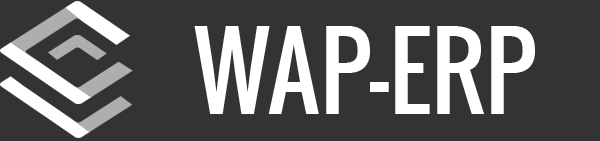
<style>
.page{position:relative;width:600px;height:141px;background:#333333}
.page>*{position:absolute;margin:0}
.t1{font:100px "Oswald-Regular";color:#ffffff}
</style>
<div class="page">
<p class="t1" style="left:194px;top:26px;width:341px;height:88px">WAP-ERP</p>
</div>
